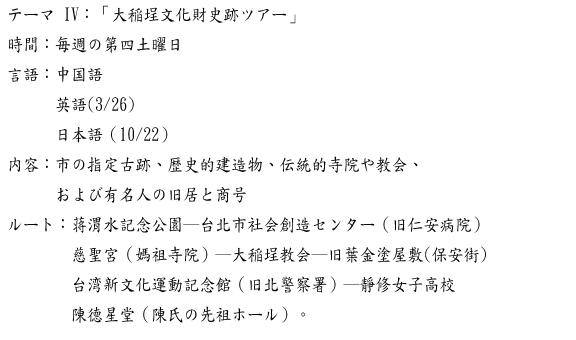
<style>
.page{position:relative;width:576px;height:340px;background:#ffffff}
.page>*{position:absolute;margin:0}
.t1{font:18px/30px "DFKaiShu-SB-Estd-BF";color:#060606;scale:0.89 1}
</style>
<div class="page">
<p class="t1" style="left:8px;top:5px;width:478px;height:318px">テーマ IV：「大稲埕文化財史跡ツアー」<br>時間：毎週の第四土曜日<br>言語：中国語<br>      英語(3/26)<br>      日本語（10/22）<br>内容：市の指定古跡、歴史的建造物、伝統的寺院や教会、<br>      および有名人の旧居と商号<br>ルート：蒋渭水記念公園─台北市社会創造センター（旧仁安病院）<br>        慈聖宮（媽祖寺院）─大稲埕教会─旧葉金塗屋敷(保安街)<br>        台湾新文化運動記念館（旧北警察署）─靜修女子高校<br>        陳德星堂（陳氏の先祖ホール）。</p>
</div>
